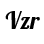
<style>
.page{position:relative;width:44px;height:44px;background:#ffffff}
.page>*{position:absolute;margin:0}
.t1{font:24px "Lobster-Regular";color:#000000}
</style>
<div class="page">
<p class="t1" style="left:5px;top:11px;width:35px;height:18px">Vzr</p>
</div>
